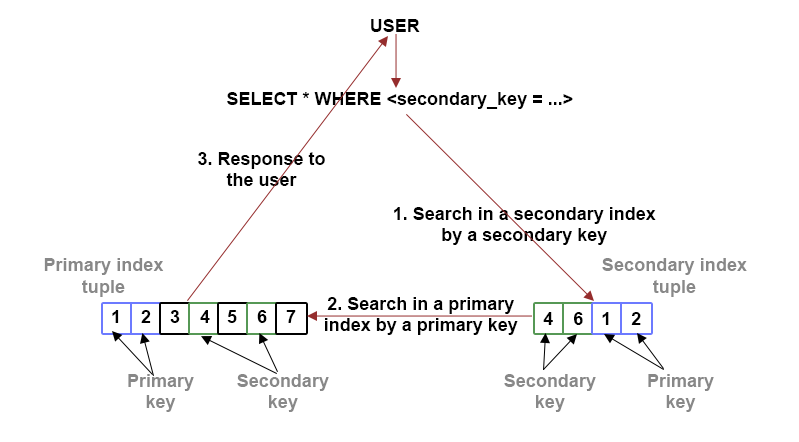
<style>
.page{position:relative;width:799px;height:442px;background:#ffffff}
.page>*{position:absolute;margin:0}
.t1{font:18px "Arial-BoldMT";color:#000000}
.t2{font:18px "Arial-BoldMT";color:#888888}
</style>
<div class="page">
<p class="t1" style="left:371px;top:19px;width:49px;height:13px">USER</p>
<p class="t1" style="left:227px;top:92px;width:346px;height:17px">SELECT * WHERE &lt;secondary_key = ...&gt;</p>
<p class="t1" style="left:198px;top:152px;width:127px;height:34px;text-align:center">3. Response to<br>the user</p>
<p class="t1" style="left:394px;top:207px;width:262px;height:38px;text-align:center">1. Search in a secondary index<br>by a secondary key</p>
<p class="t2" style="left:44px;top:258px;width:120px;height:39px;text-align:center">Primary index<br>tuple</p>
<p class="t2" style="left:602px;top:258px;width:145px;height:39px;text-align:center">Secondary index<br>tuple</p>
<p class="t1" style="left:325px;top:297px;width:193px;height:38px;text-align:center">2. Search in a primary<br>index by a primary key</p>
<p class="t1" style="left:112px;top:310px;width:7px;height:13px">1</p>
<p class="t1" style="left:141px;top:310px;width:10px;height:13px">2</p>
<p class="t1" style="left:170px;top:310px;width:10px;height:13px">3</p>
<p class="t1" style="left:200px;top:310px;width:10px;height:13px">4</p>
<p class="t1" style="left:227px;top:310px;width:10px;height:13px">5</p>
<p class="t1" style="left:257px;top:310px;width:10px;height:13px">6</p>
<p class="t1" style="left:286px;top:310px;width:10px;height:13px">7</p>
<p class="t1" style="left:543px;top:312px;width:10px;height:13px">4</p>
<p class="t1" style="left:574px;top:312px;width:9px;height:13px">6</p>
<p class="t1" style="left:602px;top:312px;width:7px;height:13px">1</p>
<p class="t1" style="left:631px;top:312px;width:10px;height:13px">2</p>
<p class="t2" style="left:128px;top:374px;width:66px;height:38px;text-align:center">Primary<br>key</p>
<p class="t2" style="left:237px;top:374px;width:92px;height:38px;text-align:center">Secondary<br>key</p>
<p class="t2" style="left:504px;top:374px;width:92px;height:38px;text-align:center">Secondary<br>key</p>
<p class="t2" style="left:648px;top:374px;width:66px;height:38px;text-align:center">Primary<br>key</p>
</div>
